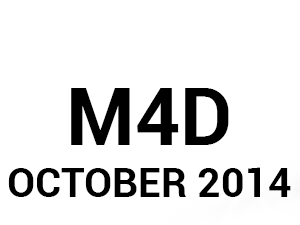
<style>
.page{position:relative;width:300px;height:225px;background:#ffffff}
.page>*{position:absolute;margin:0}
.t1{font:79px "Roboto-Bold";color:#000000}
.t2{font:41px "Roboto-Bold";color:#000000}
</style>
<div class="page">
<p class="t1" style="left:71px;top:88px;width:158px;height:57px">M4D</p>
<p class="t2" style="left:8px;top:167px;width:283px;height:30px">OCTOBER 2014</p>
</div>
